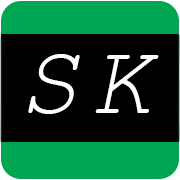
<style>
.page{position:relative;width:180px;height:180px;background:#000000}
.page>*{position:absolute;margin:0}
.t1{font:100px "CourierNewPS-ItalicMT";letter-spacing:0.1em;color:#ffffff}
</style>
<div class="page">
<p class="t1" style="left:28px;top:54px;width:131px;height:60px">SK</p>
</div>
